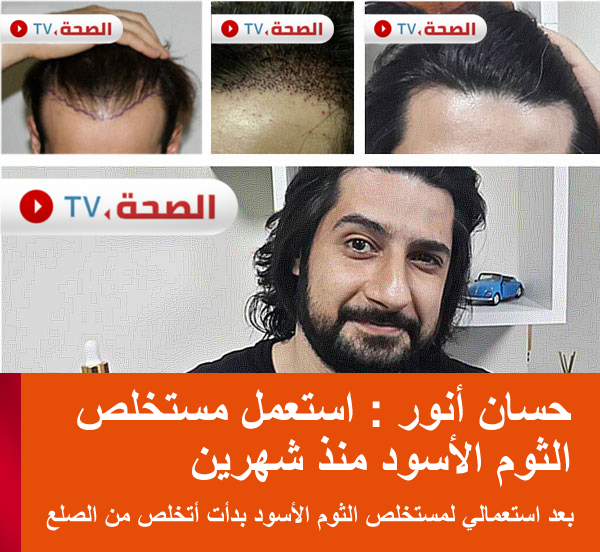
<style>
.page{position:relative;width:600px;height:552px;background:#e64d09}
.page>*{position:absolute;margin:0}
.t1{font:48.7px/49.9px "Arial-BoldMT";color:#ffffff}
.t2{font:26.7px "Arial-BoldMT";color:#ffffff}
</style>
<div class="page">
<p class="t1" style="left:77px;top:384px;width:494px;height:104px;text-align:right">ﺺﻠﺨﺘﺴﻣ ﻞﻤﻌﺘﺳﺍ : ﺭﻮﻧﺃ ﻥﺎﺴﺣ<br>ﻦﻳﺮﻬﺷ ﺬﻨﻣ ﺩﻮﺳﻷﺍ ﻡﻮﺜﻟﺍ</p>
<p class="t2" style="left:46px;top:501px;width:528px;height:30px">ﻊﻠﺼﻟﺍ ﻦﻣ ﺺﻠﺨﺗﺃ ﺕﺃﺪﺑ ﺩﻮﺳﻷﺍ ﻡﻮﺜﻟﺍ ﺺﻠﺨﺘﺴﻤﻟ ﻲﻟﺎﻤﻌﺘﺳﺍ ﺪﻌﺑ</p>
</div>
